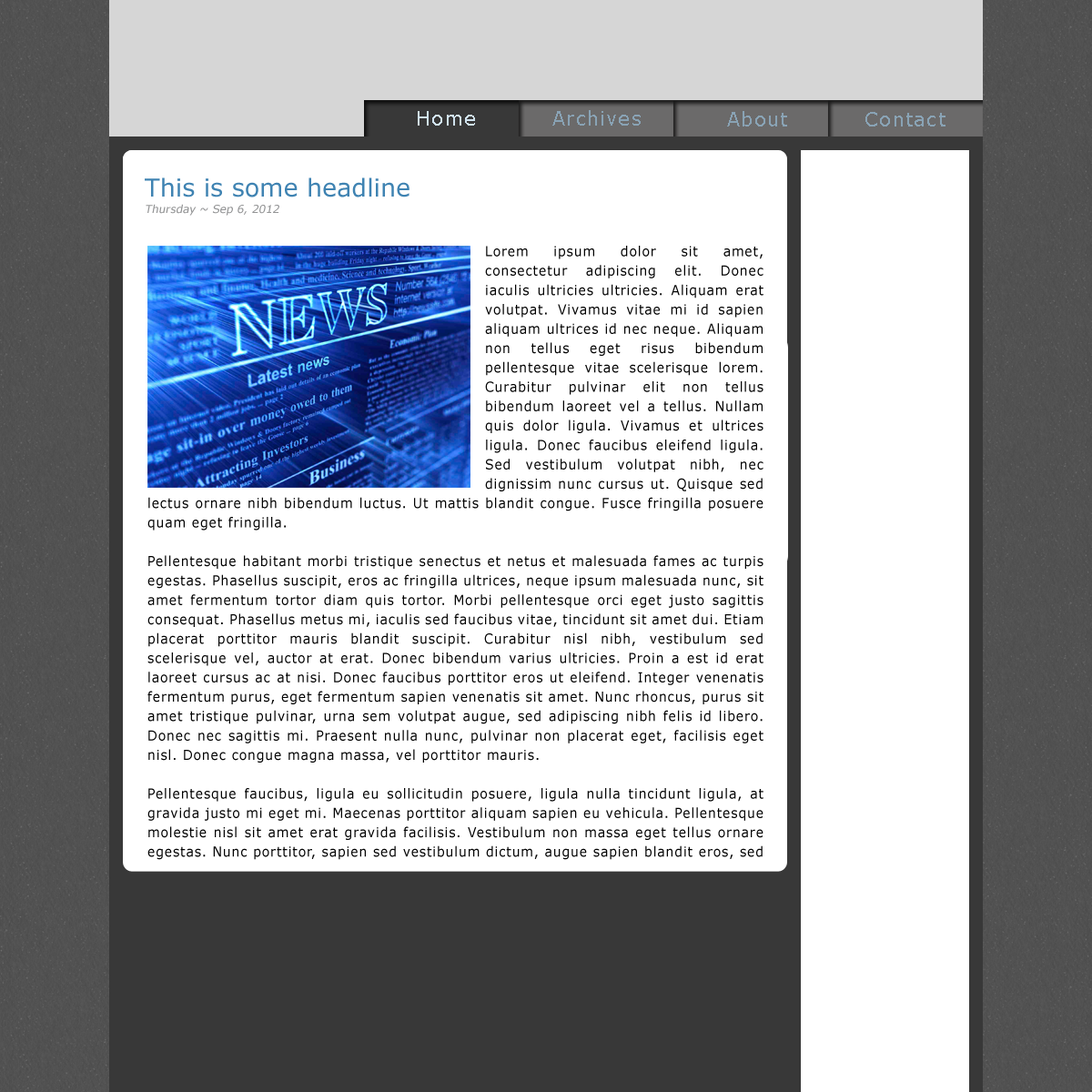
<style>
.page{position:relative;width:1092px;height:1092px;background:#ffffff}
.page>*{position:absolute;margin:0}
.t1{font:19.1px "Verdana";letter-spacing:0.06em;color:#d0e2ee}
.t2{font:19.1px "Verdana";letter-spacing:0.06em;color:#89a3b5}
.t3{font:24.6px "Verdana";color:#3f83b2}
.t4{font:10.9px "Verdana";color:#949596;font-style:italic}
.t5{font:13.6px/19.4px "Verdana";letter-spacing:0.06em;color:#010101;scale:0.94 1}
</style>
<div class="page">
<p class="t1" style="left:418px;top:111px;width:57px;height:15px">Home</p>
<p class="t2" style="left:552px;top:110px;width:89px;height:16px">Archives</p>
<p class="t2" style="left:727px;top:111px;width:60px;height:15px">About</p>
<p class="t2" style="left:865px;top:112px;width:80px;height:14px">Contact</p>
<p class="t3" style="left:145px;top:177px;width:264px;height:20px">This is some headline</p>
<p class="t4" style="left:146px;top:204px;width:133px;height:12px">Thursday ~ Sep 6, 2012</p>
<p class="t5" style="left:147px;top:246px;width:616px;height:614px;text-align:justify">Lorem ipsum dolor sit amet, consectetur adipiscing elit. Donec iaculis ultricies ultricies. Aliquam erat volutpat. Vivamus vitae mi id sapien aliquam ultrices id nec neque. Aliquam non tellus eget risus bibendum pellentesque vitae scelerisque lorem. Curabitur pulvinar elit non tellus bibendum laoreet vel a tellus. Nullam quis dolor ligula. Vivamus et ultrices ligula. Donec faucibus eleifend ligula. Sed vestibulum volutpat nibh, nec dignissim nunc cursus ut. Quisque sed lectus ornare nibh bibendum luctus. Ut mattis blandit congue. Fusce fringilla posuere quam eget fringilla.<br><br>Pellentesque habitant morbi tristique senectus et netus et malesuada fames ac turpis egestas. Phasellus suscipit, eros ac fringilla ultrices, neque ipsum malesuada nunc, sit amet fermentum tortor diam quis tortor. Morbi pellentesque orci eget justo sagittis consequat. Phasellus metus mi, iaculis sed faucibus vitae, tincidunt sit amet dui. Etiam placerat porttitor mauris blandit suscipit. Curabitur nisl nibh, vestibulum sed scelerisque vel, auctor at erat. Donec bibendum varius ultricies. Proin a est id erat laoreet cursus ac at nisi. Donec faucibus porttitor eros ut eleifend. Integer venenatis fermentum purus, eget fermentum sapien venenatis sit amet. Nunc rhoncus, purus sit amet tristique pulvinar, urna sem volutpat augue, sed adipiscing nibh felis id libero. Donec nec sagittis mi. Praesent nulla nunc, pulvinar non placerat eget, facilisis eget nisl. Donec congue magna massa, vel porttitor mauris.<br><br>Pellentesque faucibus, ligula eu sollicitudin posuere, ligula nulla tincidunt ligula, at gravida justo mi eget mi. Maecenas porttitor aliquam sapien eu vehicula. Pellentesque molestie nisl sit amet erat gravida facilisis. Vestibulum non massa eget tellus ornare egestas. Nunc porttitor, sapien sed vestibulum dictum, augue sapien blandit eros, sed auctor tellus turpis ut massa. Vivamus id est ante. Aenean at volutpat justo. Lorem ipsum dolor sit amet, consectetur adipiscing elit. Vivamus vestibulum elit a justo dapibus fermentum. Suspendisse sagittis quam eu risus laoreet sit amet dictum neque luctus. Cras at lacus congue tellus mollis sodales eget sed ligula. Nulla molestie facilisis leo quis suscipit. Mauris purus tellus, faucibus ut ullamcorper id, malesuada at ipsum.</p>
</div>
